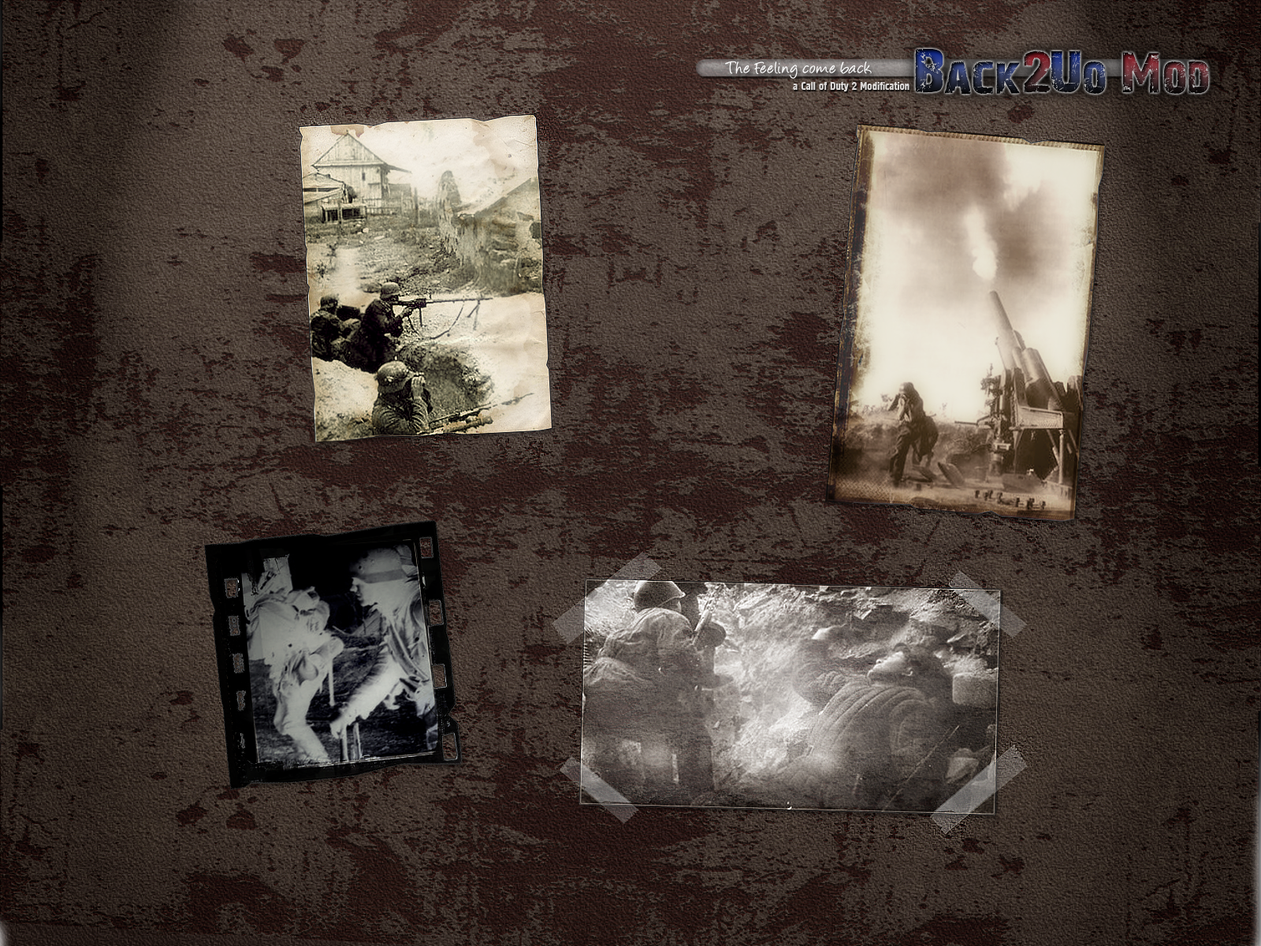
<style>
.page{position:relative;width:1261px;height:946px}
.page>*{position:absolute;margin:0}
.t1{font:47.3px "28-Days-Later-Regular";scale:1.07 1}
.t2{font:56.7px "28-Days-Later-Regular";scale:1.07 1}
.t3{font:18.9px "Angelina";color:#ffffff;scale:1.07 1}
.t4{font:11px "ft57-Normal";color:#dddad8}
</style>
<div class="page">
<p class="t1" style="left:915px;top:49px;width:294px;height:46px"><span class="t2">B</span>ack<span class="t2">2</span><span class="t2">U</span>o <span class="t2">M</span>od</p>
<p class="t3" style="left:725px;top:61px;width:147px;height:18px">The Feeling come back</p>
<p class="t4" style="left:793px;top:81px;width:116px;height:10px">a Call of Duty 2 Modification</p>
</div>
